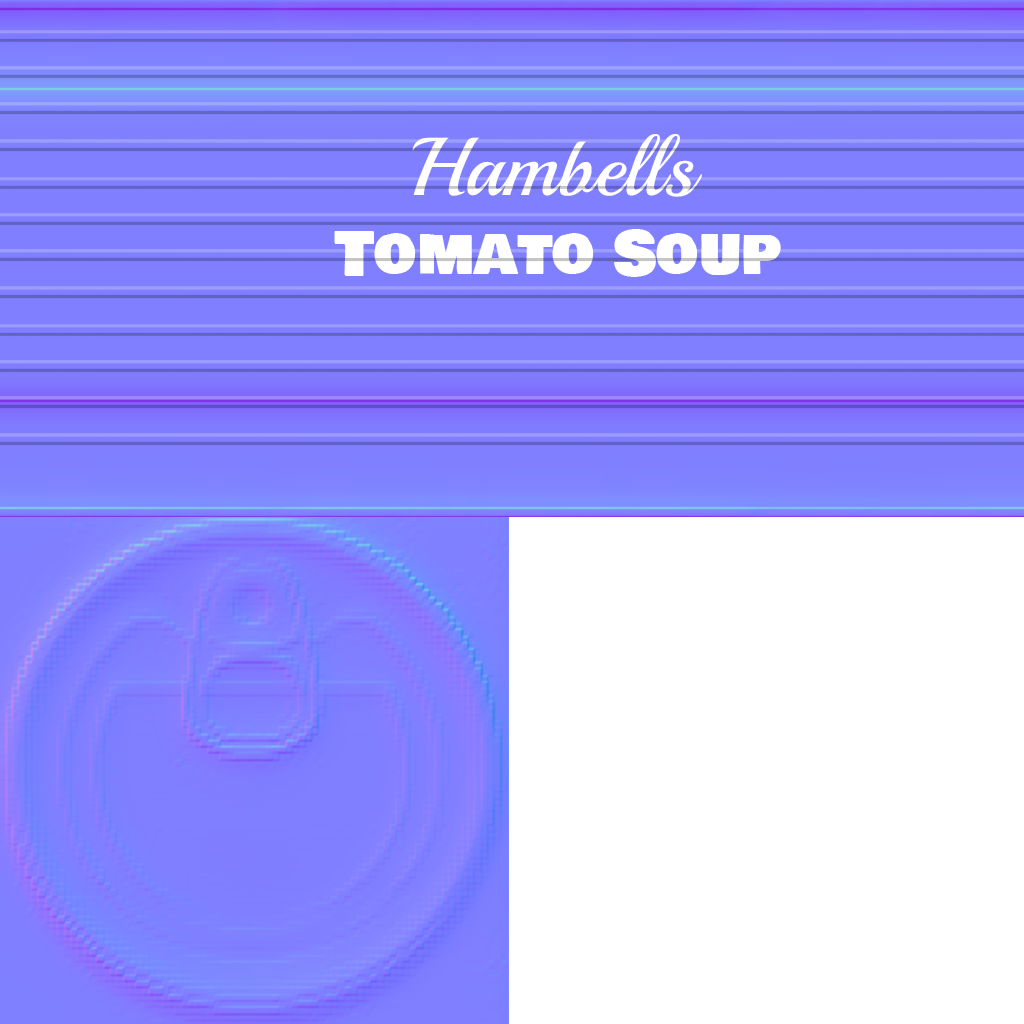
<style>
.page{position:relative;width:1024px;height:1024px;background:#ffffff}
.page>*{position:absolute;margin:0}
.t1{font:82px "Playball-Regular";color:#ffffff}
.t2{font:60px "BowlbyOneSC-Regular";color:#ffffff}
</style>
<div class="page">
<p class="t1" style="left:412px;top:134px;width:290px;height:63px">Hambells</p>
<p class="t1" style="left:412px;top:134px;width:290px;height:63px">Hambells</p>
<p class="t2" style="left:334px;top:229px;width:447px;height:48px">Tomato Soup</p>
<p class="t2" style="left:334px;top:229px;width:447px;height:48px">Tomato Soup</p>
</div>
